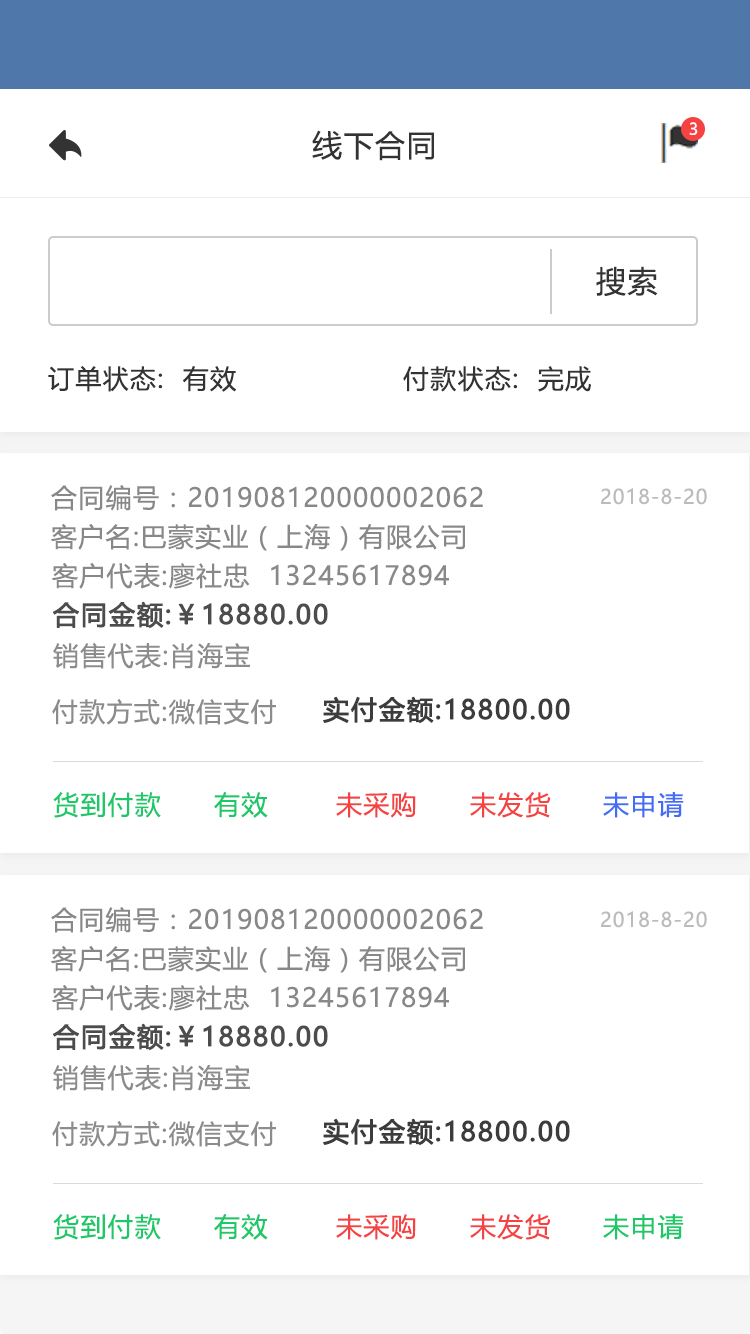
<style>
.page{position:relative;width:750px;height:1334px;background:#ffffff}
.page>*{position:absolute;margin:0}
.t1{font:16px "MicrosoftYaHeiUI";color:#ffffff}
.t2{font:30px "MicrosoftYaHeiUI";letter-spacing:0.05em;color:#333333}
.t3{font:26px "MicrosoftYaHeiUI";letter-spacing:0.05em;color:#333333}
.t4{font:26px "MicrosoftYaHeiUI";letter-spacing:0.05em;color:#888888}
.t5{font:20px "MicrosoftYaHeiUI";letter-spacing:0.05em;color:#bbbbbb}
.t6{font:26px "MicrosoftYaHeiUI";letter-spacing:0.05em;color:#4c4c4c;font-weight:bold}
.t7{font:26px "MicrosoftYaHeiUI";letter-spacing:0.05em;color:#8c8c8c}
.t8{font:26px "MicrosoftYaHeiUI";letter-spacing:0.05em;color:#3c3c3c;font-weight:bold}
.t9{font:26px "MicrosoftYaHeiUI";letter-spacing:0.05em;color:#1dc869}
.t10{font:26px "MicrosoftYaHeiUI";letter-spacing:0.05em;color:#f54343}
.t11{font:26px "MicrosoftYaHeiUI";letter-spacing:0.05em;color:#436df5}
</style>
<div class="page">
<p class="t1" style="left:689px;top:122px;width:9px;height:13px">3</p>
<p class="t2" style="left:312px;top:130px;width:122px;height:31px">线下合同</p>
<p class="t2" style="left:596px;top:266px;width:62px;height:30px">搜索</p>
<p class="t3" style="left:48px;top:366px;width:189px;height:26px">订单状态:  有效</p>
<p class="t3" style="left:403px;top:366px;width:188px;height:26px">付款状态:  完成</p>
<p class="t4" style="left:51px;top:485px;width:432px;height:26px">合同编号：201908120000002062</p>
<p class="t5" style="left:601px;top:488px;width:106px;height:17px">2018-8-20</p>
<p class="t4" style="left:51px;top:524px;width:414px;height:27px">客户名:巴蒙实业（上海）有限公司</p>
<p class="t4" style="left:52px;top:563px;width:397px;height:26px">客户代表:廖社忠  13245617894</p>
<p class="t6" style="left:53px;top:601px;width:275px;height:28px">合同金额:￥18880.00</p>
<p class="t7" style="left:53px;top:643px;width:197px;height:26px">销售代表:肖海宝</p>
<p class="t7" style="left:52px;top:699px;width:224px;height:26px">付款方式:微信支付</p>
<p class="t8" style="left:323px;top:696px;width:247px;height:28px">实付金额:18800.00</p>
<p class="t9" style="left:53px;top:792px;width:108px;height:26px">货到付款</p>
<p class="t9" style="left:214px;top:792px;width:54px;height:26px">有效</p>
<p class="t10" style="left:336px;top:792px;width:80px;height:26px">未采购</p>
<p class="t10" style="left:470px;top:792px;width:81px;height:26px">未发货</p>
<p class="t11" style="left:603px;top:792px;width:81px;height:26px">未申请</p>
<p class="t4" style="left:51px;top:907px;width:432px;height:26px">合同编号：201908120000002062</p>
<p class="t5" style="left:601px;top:911px;width:106px;height:17px">2018-8-20</p>
<p class="t4" style="left:51px;top:946px;width:414px;height:27px">客户名:巴蒙实业（上海）有限公司</p>
<p class="t4" style="left:52px;top:985px;width:397px;height:26px">客户代表:廖社忠  13245617894</p>
<p class="t6" style="left:53px;top:1023px;width:275px;height:28px">合同金额:￥18880.00</p>
<p class="t7" style="left:53px;top:1065px;width:197px;height:26px">销售代表:肖海宝</p>
<p class="t7" style="left:52px;top:1121px;width:224px;height:26px">付款方式:微信支付</p>
<p class="t8" style="left:323px;top:1118px;width:247px;height:28px">实付金额:18800.00</p>
<p class="t9" style="left:53px;top:1214px;width:108px;height:26px">货到付款</p>
<p class="t9" style="left:214px;top:1214px;width:54px;height:26px">有效</p>
<p class="t10" style="left:336px;top:1214px;width:80px;height:26px">未采购</p>
<p class="t10" style="left:470px;top:1214px;width:81px;height:26px">未发货</p>
<p class="t9" style="left:603px;top:1214px;width:81px;height:26px">未申请</p>
</div>
